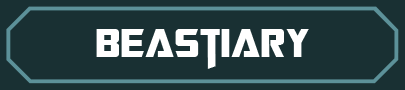
<style>
.page{position:relative;width:405px;height:90px;background:#193033}
.page>*{position:absolute;margin:0}
.t1{font:45px "TransformersMovie";letter-spacing:0.02em;color:#ffffff}
</style>
<div class="page">
<p class="t1" style="left:96px;top:29px;width:213px;height:40px">beastiary</p>
</div>
